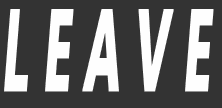
<style>
.page{position:relative;width:222px;height:108px;background:#333333}
.page>*{position:absolute;margin:0}
.t1{font:114.5px "MicrosoftTaiLe-Bold";letter-spacing:0.26em;color:#fefefe;font-weight:bold;font-style:italic;scale:0.44 1}
</style>
<div class="page">
<p class="t1" style="left:4px;top:9px;width:210px;height:83px">LEAVE</p>
</div>
